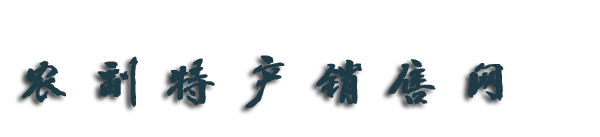
<style>
.page{position:relative;width:600px;height:137px;background:#ffffff}
.page>*{position:absolute;margin:0}
.t1{font:60px "FZZJ-HFXSJW";letter-spacing:0.2em;color:#1e3c47;font-weight:bold}
</style>
<div class="page">
<p class="t1" style="left:21px;top:55px;width:483px;height:53px">农副特产销售网</p>
</div>
